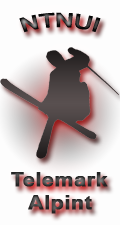
<style>
.page{position:relative;width:120px;height:225px;background:#fdfdfd}
.page>*{position:absolute;margin:0}
.t1{font:20px "Arial-BoldMT";scale:1.13 1}
.t2{font:19px "Arial-BoldMT";font-weight:bold;scale:1.13 1}
</style>
<div class="page">
<p class="t1" style="left:19px;top:12px;width:82px;height:21px">NTNUI</p>
<p class="t2" style="left:11px;top:172px;width:97px;height:42px;text-align:center">Telemark<br>Alpint</p>
</div>
